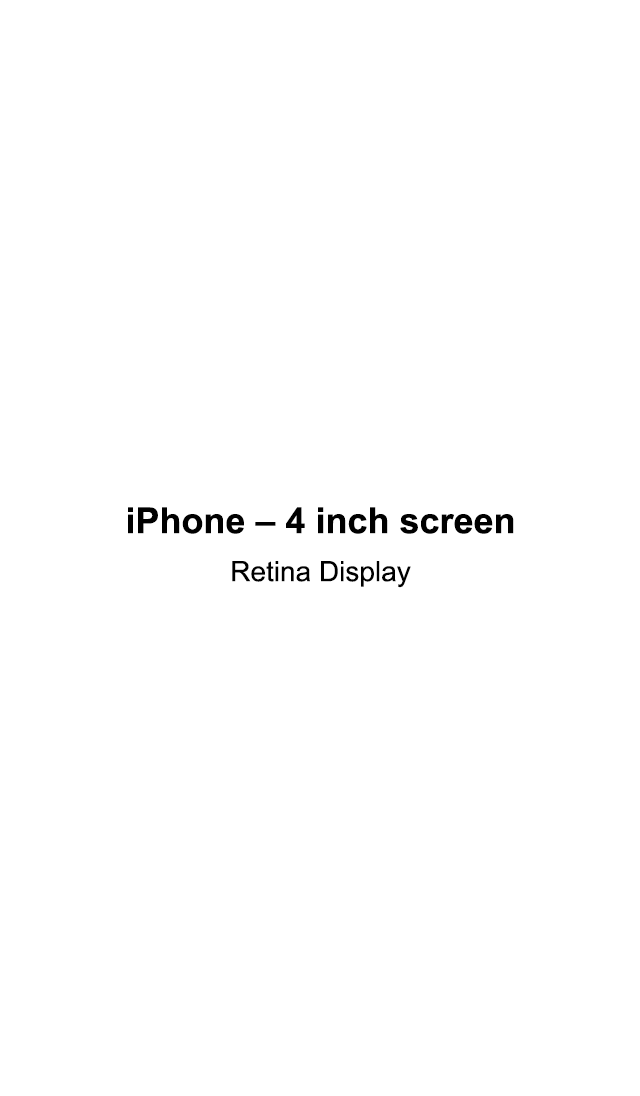
<style>
.page{position:relative;width:640px;height:1096px;background:#ffffff}
.page>*{position:absolute;margin:0}
.t1{font:36px/48px "Arial-BoldMT";color:#000000}
.t2{font:28px/48px "ArialMT";color:#000000}
</style>
<div class="page">
<p class="t1" style="left:128px;top:507px;width:386px;height:81px;text-align:center">iPhone – 4 inch screen<br><span class="t2">Retina Display</span></p>
</div>
